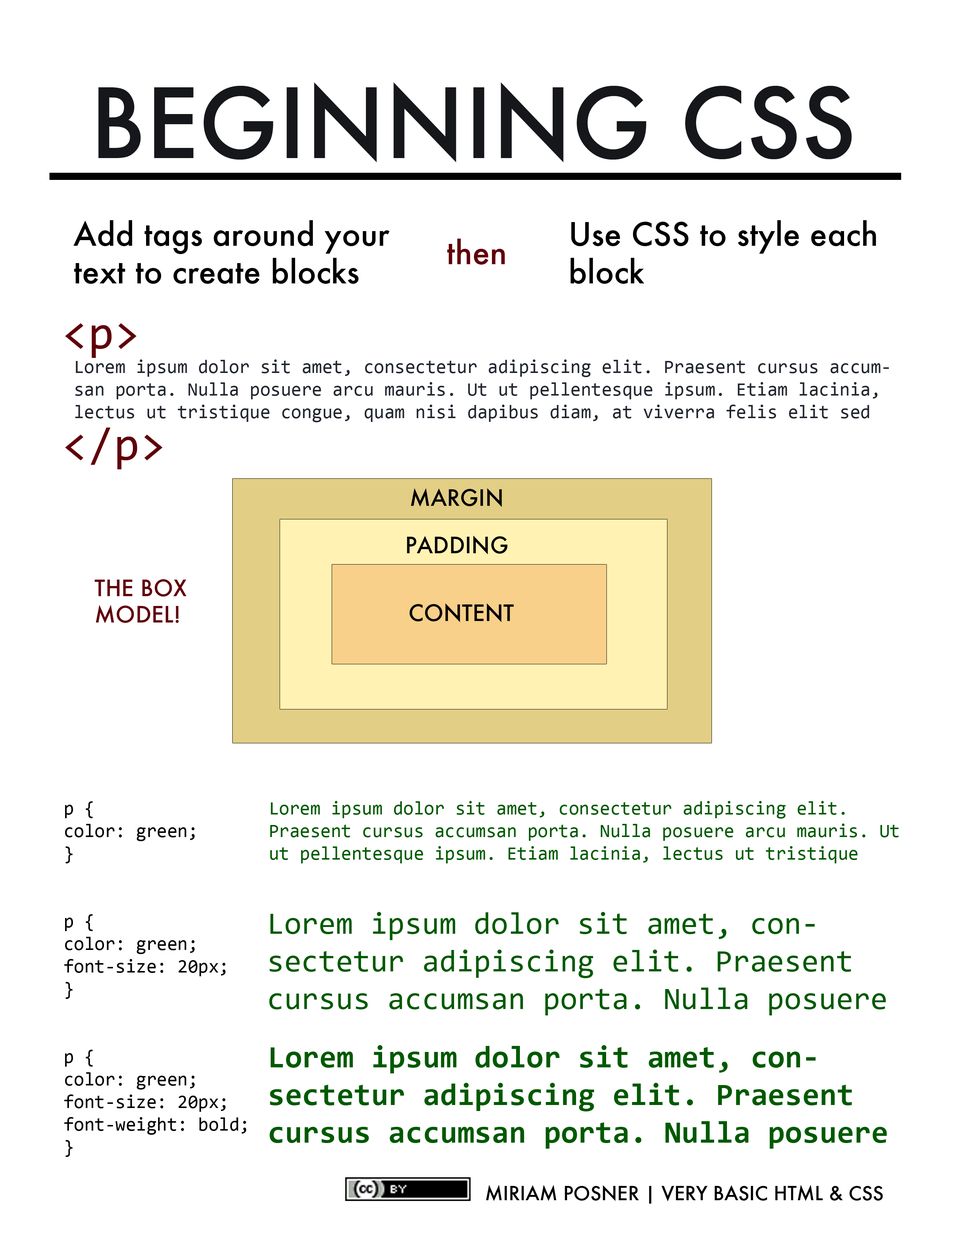
<style>
.page{position:relative;width:960px;height:1242px;background:#ffffff}
.page>*{position:absolute;margin:0}
.t1{font:94.1px "Futura-Medium";color:#15171a}
.t2{font:31.4px "Futura-Medium";color:#000000}
.t3{font:31.4px "Futura-Medium";color:#600009}
.t4{font:47.1px "Consolas";color:#600009}
.t5{font:18.8px "Consolas";color:#21262f}
.t6{font:22px "Futura-Medium";color:#000000}
.t7{font:22px "Futura-Medium";color:#600009}
.t8{font:18.8px "Consolas";color:#000000}
.t9{font:18.8px "Consolas";color:#005900}
.t10{font:31.4px "Consolas";color:#005900}
.t11{font:31.4px "Consolas-Bold";color:#005900}
.t12{font:18.8px "Futura-Medium";color:#000000}
</style>
<div class="page">
<p class="t1" style="left:98px;top:82px;width:754px;height:80px">BEGINNING CSS</p>
<p class="t2" style="left:73px;top:220px;width:317px;height:64px">Add tags around your text to create blocks</p>
<p class="t2" style="left:570px;top:220px;width:306px;height:64px">Use CSS to style each block</p>
<p class="t3" style="left:447px;top:239px;width:58px;height:26px">then</p>
<p class="t4" style="left:65px;top:323px;width:72px;height:35px">&lt;p&gt;</p>
<p class="t5" style="left:75px;top:359px;width:814px;height:63px">Lorem ipsum dolor sit amet, consectetur adipiscing elit. Praesent cursus accumsan porta. Nulla posuere arcu mauris. Ut ut pellentesque ipsum. Etiam lacinia, lectus ut tristique congue, quam nisi dapibus diam, at viverra felis elit sed</p>
<p class="t4" style="left:65px;top:428px;width:98px;height:41px">&lt;/p&gt;</p>
<p class="t6" style="left:411px;top:488px;width:91px;height:19px">MARGIN</p>
<p class="t6" style="left:407px;top:536px;width:100px;height:18px">PADDING</p>
<p class="t7" style="left:94px;top:579px;width:93px;height:44px">THE BOX MODEL!</p>
<p class="t6" style="left:410px;top:603px;width:104px;height:19px">CONTENT</p>
<p class="t8" style="left:64px;top:801px;width:182px;height:356px">p {<br>color: green;<br>}<br><br><br>p {<br>color: green;<br>font-size: 20px;<br>}<br><br><br>p {<br>color: green;<br>font-size: 20px;<br>font-weight: bold;<br>}</p>
<p class="t9" style="left:270px;top:801px;width:629px;height:63px">Lorem ipsum dolor sit amet, consectetur adipiscing elit. Praesent cursus accumsan porta. Nulla posuere arcu mauris. Ut ut pellentesque ipsum. Etiam lacinia, lectus ut tristique congue, quam nisi dapibus diam</p>
<p class="t10" style="left:269px;top:912px;width:617px;height:104px">Lorem ipsum dolor sit amet, consectetur adipiscing elit. Praesent cursus accumsan porta. Nulla posuere arcu mauris. Ut ut pellentesque ipsum. Etiam lacinia, lectus ut tristique congue, quam nisi dapibus diam</p>
<p class="t11" style="left:270px;top:1045px;width:617px;height:104px">Lorem ipsum dolor sit amet, consectetur adipiscing elit. Praesent cursus accumsan porta. Nulla posuere arcu mauris. Ut ut pellentesque ipsum. Etiam lacinia, lectus ut tristique congue, quam nisi dapibus diam</p>
<p class="t12" style="left:486px;top:1185px;width:397px;height:19px">MIRIAM POSNER | VERY BASIC HTML &amp; CSS</p>
</div>
